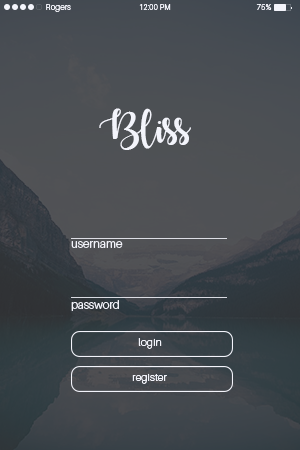
<style>
.page{position:relative;width:300px;height:450px}
.page>*{position:absolute;margin:0}
.t1{font:8.3px "Aileron-Light";color:#f3f4fb}
.t2{font:7.8px "Aileron-Light";color:#f3f4fb}
.t3{font:7.9px "Aileron-Light";color:#f3f4fb}
.t4{font:31.8px "AutumninNovember";color:#f3f4fb}
.t5{font:11.9px "Aileron-Light";color:#f3f4fb}
.t6{font:11.5px "Aileron-Light";color:#f3f4fb}
.t7{font:10.8px "Aileron-Light";color:#f3f4fb}
</style>
<div class="page">
<p class="t1" style="left:46px;top:4px;width:25px;height:8px">Rogers</p>
<p class="t2" style="left:139px;top:4px;width:32px;height:6px">12:00 PM</p>
<p class="t3" style="left:256px;top:4px;width:16px;height:6px">75%</p>
<p class="t4" style="left:99px;top:108px;width:92px;height:42px">Bliss</p>
<p class="t5" style="left:71px;top:241px;width:52px;height:7px">username</p>
<p class="t6" style="left:71px;top:300px;width:48px;height:11px">password</p>
<p class="t7" style="left:138px;top:338px;width:24px;height:11px">login</p>
<p class="t7" style="left:132px;top:373px;width:35px;height:11px">register</p>
</div>
